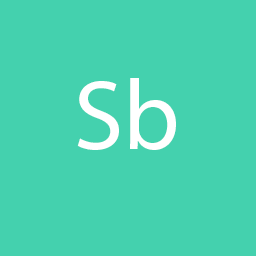
<style>
.page{position:relative;width:256px;height:256px;background:#44d1ae}
.page>*{position:absolute;margin:0}
.t1{font:100px "MyriadPro-Regular";color:#ffffff}
</style>
<div class="page">
<p class="t1" style="left:77px;top:78px;width:99px;height:72px">Sb</p>
</div>
